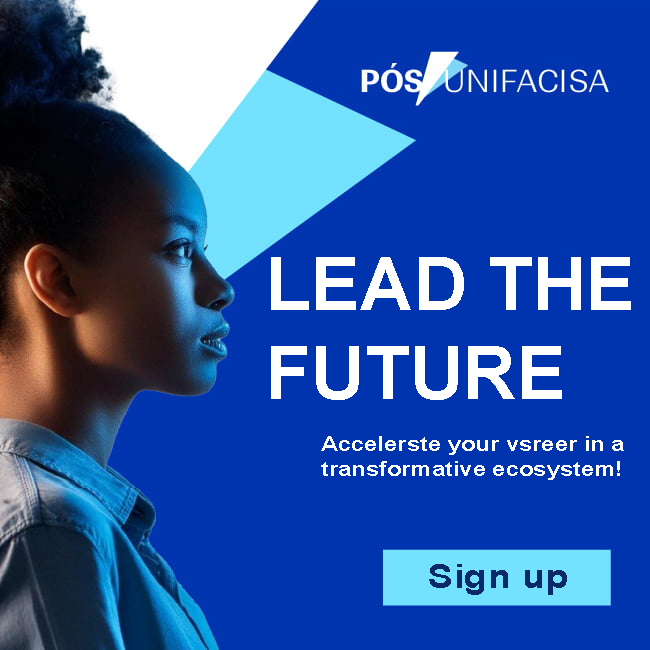
<style>
.page{position:relative;width:650px;height:650px;background:#0034ae}
.page>*{position:absolute;margin:0}
.t1{font:74px "Arial-BoldMT";color:#ffffff}
.t2{font:20.7px "Arial-BoldMT";color:#ffffff;scale:1.15 1}
.t3{font:33.4px "Arial-BoldMT";color:#0b2969;scale:1.15 1}
</style>
<div class="page">
<p class="t1" style="left:271px;top:257px;width:360px;height:143px">LEAD THE<br>FUTURE</p>
<p class="t2" style="left:321px;top:436px;width:303px;height:44px">Accelerste your vsreer in a<br>transformative ecosystem!</p>
<p class="t3" style="left:429px;top:564px;width:138px;height:31px">Sign up</p>
</div>
